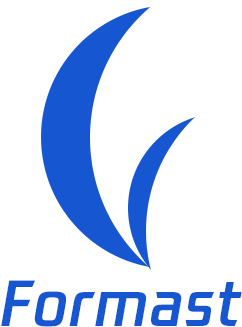
<style>
.page{position:relative;width:242px;height:327px;background:#ffffff}
.page>*{position:absolute;margin:0}
.t1{font:60px "TencentSansW7";color:#1756d1}
</style>
<div class="page">
<p class="t1" style="left:1px;top:280px;width:241px;height:47px">Formast</p>
</div>
